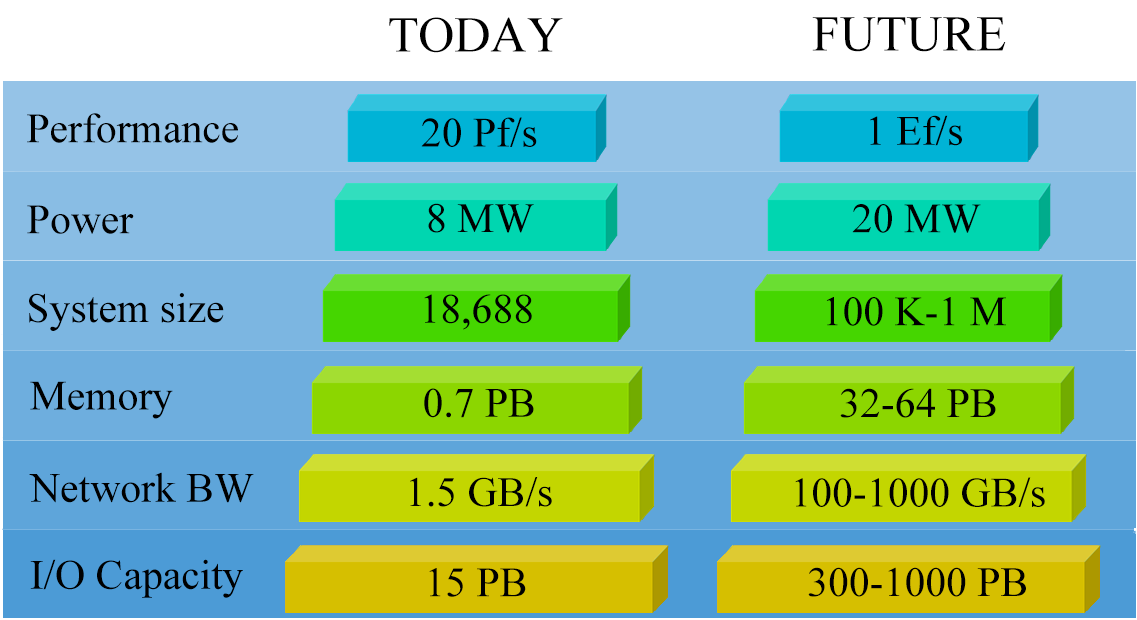
<style>
.page{position:relative;width:1137px;height:620px}
.page>*{position:absolute;margin:0}
.t1{font:50px "TimesNewRomanPSMT";color:#000000}
.t2{font:41.7px "TimesNewRomanPSMT";color:#000000}
</style>
<div class="page">
<p class="t1" style="left:389px;top:17px;width:174px;height:36px">TODAY</p>
<p class="t1" style="left:812px;top:17px;width:194px;height:35px">FUTURE</p>
<p class="t2" style="left:27px;top:113px;width:211px;height:30px">Performance</p>
<p class="t2" style="left:421px;top:117px;width:116px;height:30px">20 Pf/s</p>
<p class="t2" style="left:870px;top:115px;width:92px;height:31px">1 Ef/s</p>
<p class="t2" style="left:27px;top:205px;width:107px;height:29px">Power</p>
<p class="t2" style="left:428px;top:203px;width:106px;height:30px">8 MW</p>
<p class="t2" style="left:852px;top:204px;width:129px;height:29px">20 MW</p>
<p class="t2" style="left:29px;top:293px;width:195px;height:38px">System size</p>
<p class="t2" style="left:424px;top:294px;width:108px;height:36px">18,688</p>
<p class="t2" style="left:826px;top:297px;width:180px;height:29px">100 K-1 M</p>
<p class="t2" style="left:30px;top:381px;width:143px;height:38px">Memory</p>
<p class="t2" style="left:424px;top:388px;width:110px;height:30px">0.7 PB</p>
<p class="t2" style="left:840px;top:388px;width:156px;height:30px">32-64 PB</p>
<p class="t2" style="left:29px;top:472px;width:225px;height:31px">Network BW</p>
<p class="t2" style="left:410px;top:477px;width:142px;height:30px">1.5 GB/s</p>
<p class="t2" style="left:795px;top:477px;width:250px;height:30px">100-1000 GB/s</p>
<p class="t2" style="left:30px;top:559px;width:213px;height:39px">I/O Capacity</p>
<p class="t2" style="left:429px;top:568px;width:97px;height:29px">15 PB</p>
<p class="t2" style="left:808px;top:567px;width:218px;height:30px">300-1000 PB</p>
</div>
